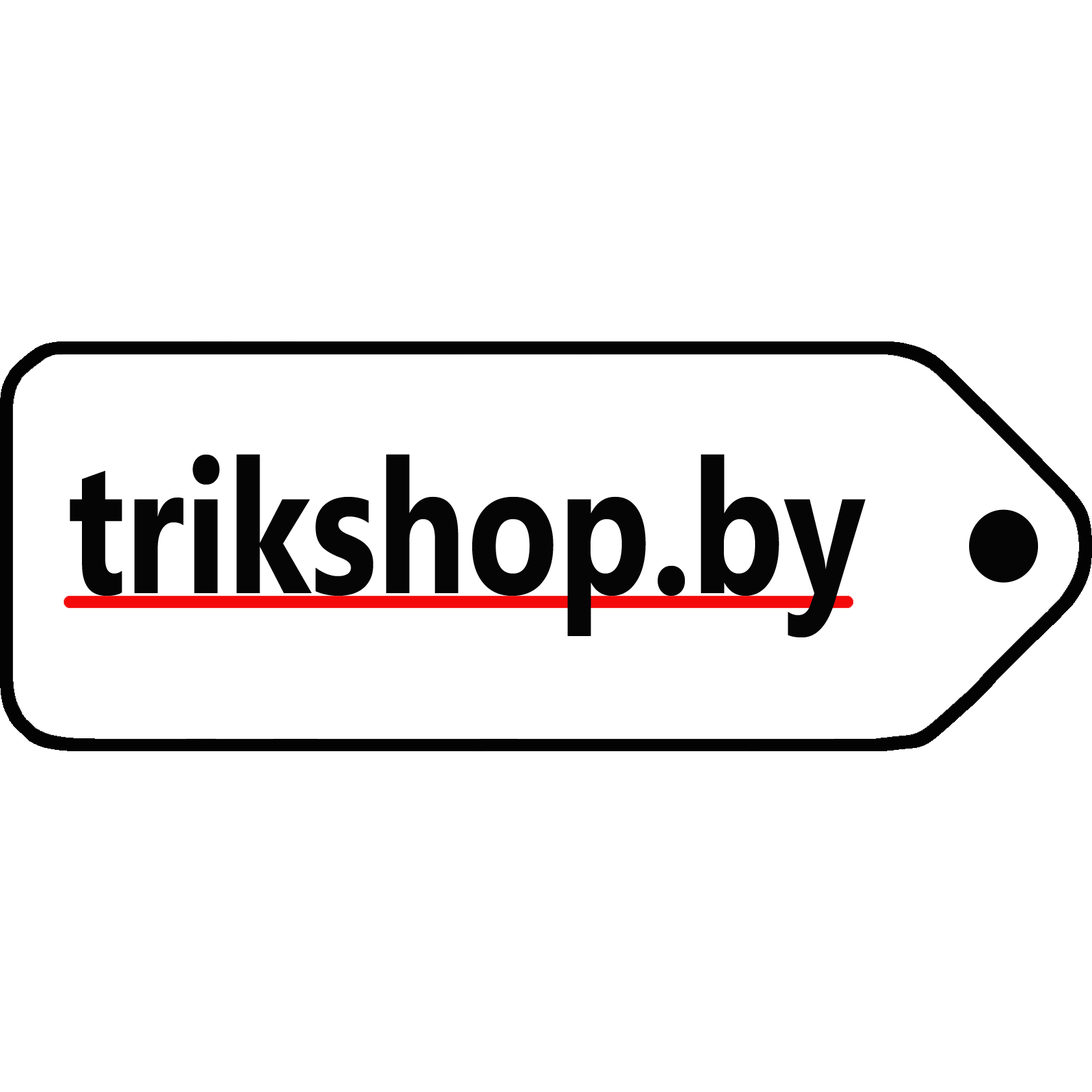
<style>
.page{position:relative;width:1092px;height:1092px;background:#ffffff}
.page>*{position:absolute;margin:0}
.t1{font:187px "Ebrima-Bold";color:#050505;scale:0.8 1}
</style>
<div class="page">
<p class="t1" style="left:70px;top:454px;width:796px;height:183px">trikshop.by</p>
</div>
